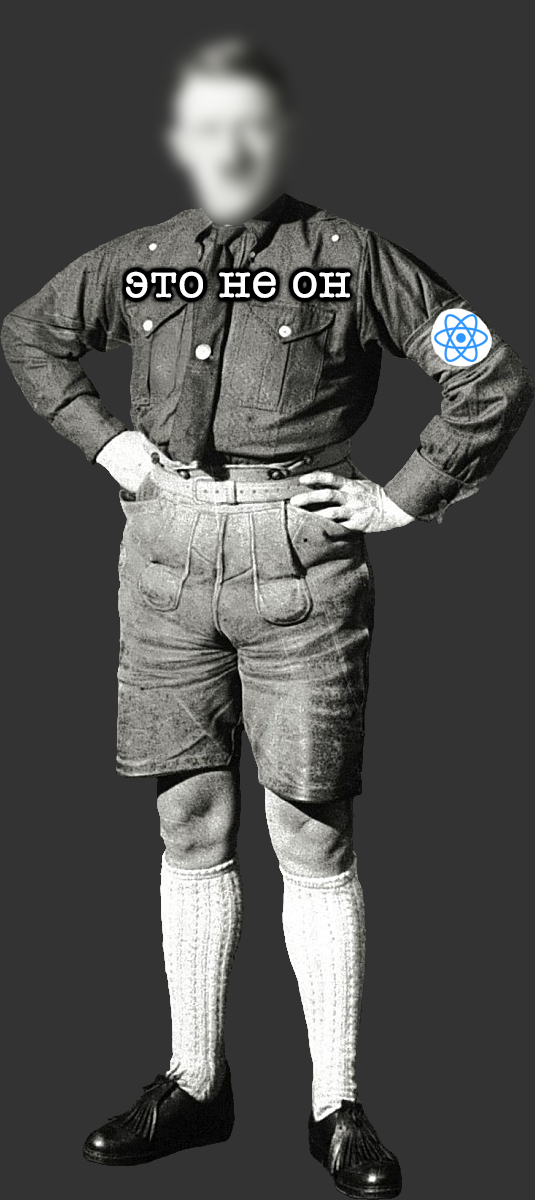
<style>
.page{position:relative;width:535px;height:1200px;background:#333333}
.page>*{position:absolute;margin:0}
.t1{font:48px "AmericanTypewriter";color:#fefefe;font-weight:bold}
</style>
<div class="page">
<p class="t1" style="left:126px;top:271px;width:225px;height:27px">это не он</p>
</div>
